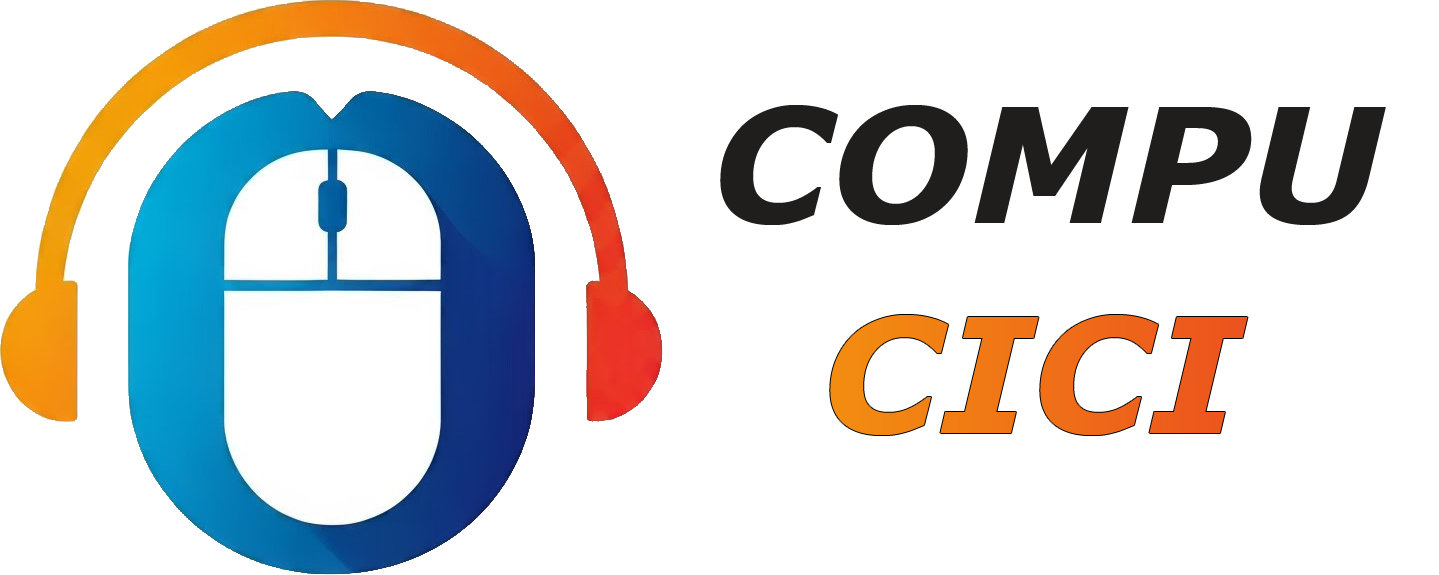
<style>
.page{position:relative;width:1439px;height:575px;background:#ffffff}
.page>*{position:absolute;margin:0}
.t1{font:160px "Verdana-BoldItalic";color:#201d1d;scale:1.03 1}
.t2{font:160px "Verdana-BoldItalic";scale:1.03 1}
</style>
<div class="page">
<p class="t1" style="left:720px;top:105px;width:666px;height:120px">COMPU</p>
<p class="t2" style="left:830px;top:315px;width:418px;height:120px">CICI</p>
</div>
